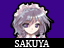
<style>
.page{position:relative;width:64px;height:48px;background:#3c038b}
.page>*{position:absolute;margin:0}
.t1{font:10px "Cambria";color:#ffffff}
</style>
<div class="page">
<p class="t1" style="left:14px;top:40px;width:36px;height:7px">SAKUYA</p>
</div>
